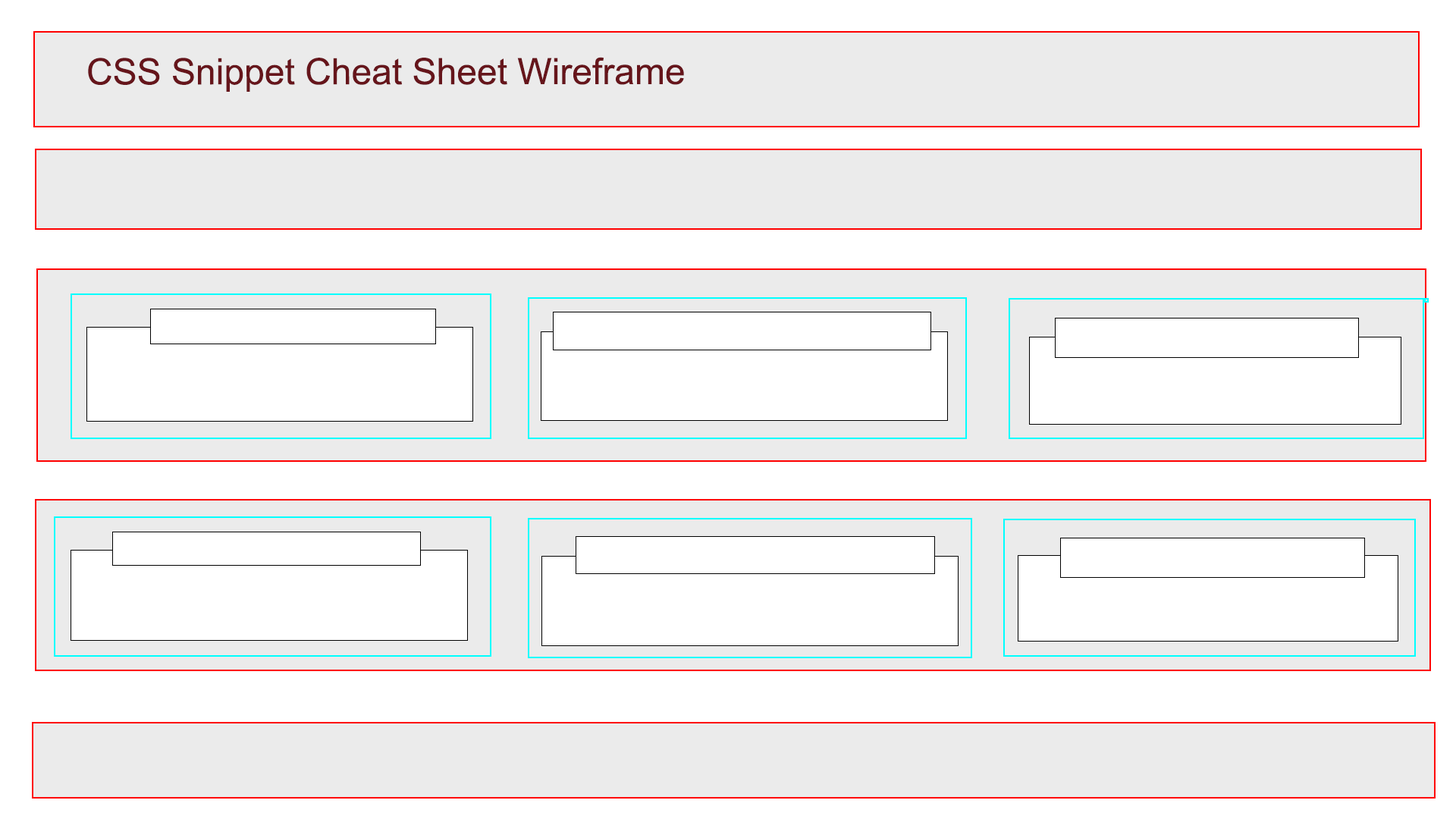
<style>
.page{position:relative;width:1456px;height:819px;background:#ffffff}
.page>*{position:absolute;margin:0}
.t1{font:36.4px "ArialMT";color:#66151b}
</style>
<div class="page">
<p class="t1" style="left:88px;top:57px;width:596px;height:35px">CSS Snippet Cheat Sheet Wireframe</p>
</div>
